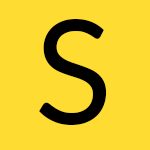
<style>
.page{position:relative;width:150px;height:150px;background:#ffdc32}
.page>*{position:absolute;margin:0}
.t1{font:144px "Lato-Regular";color:#000000}
</style>
<div class="page">
<p class="t1" style="left:39px;top:19px;width:68px;height:106px">S</p>
</div>
